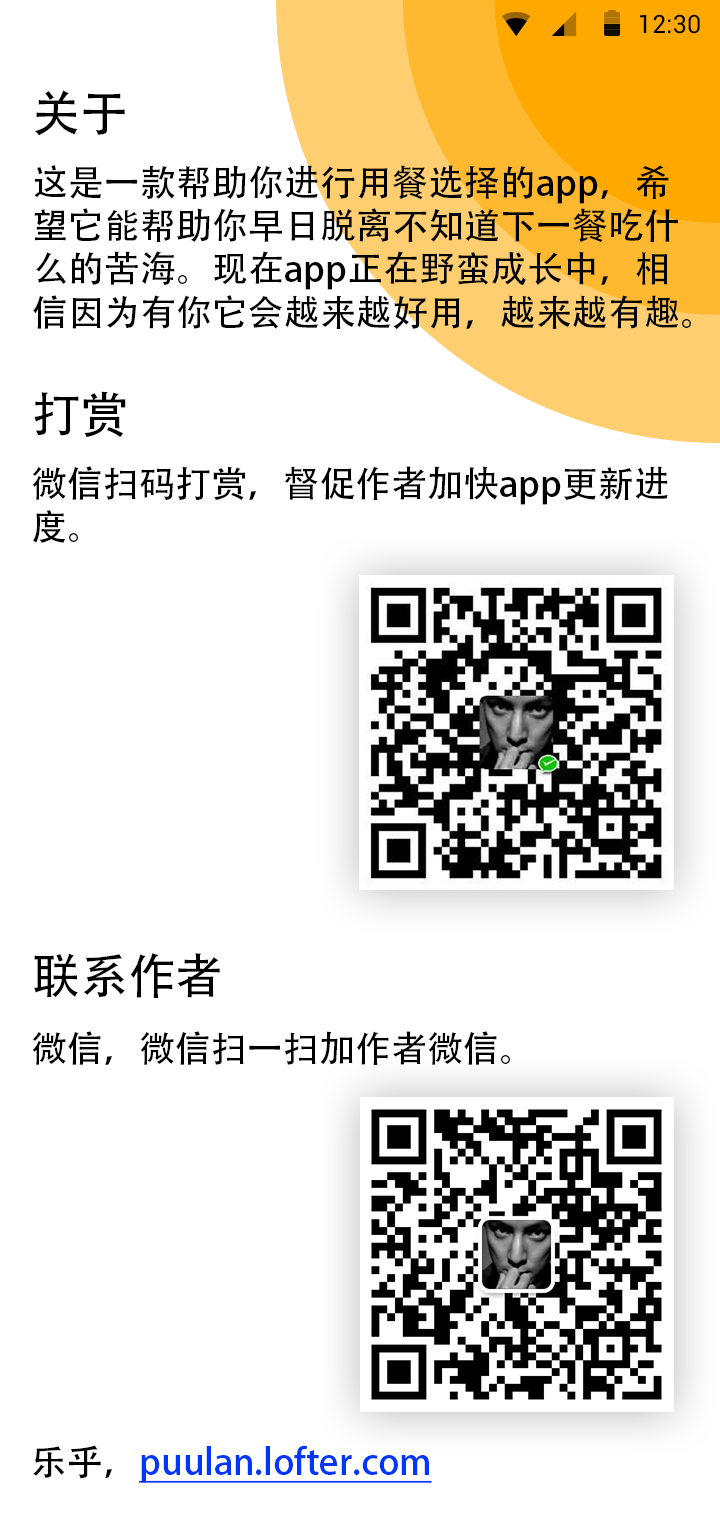
<style>
.page{position:relative;width:720px;height:1538px;background:#ffffff}
.page>*{position:absolute;margin:0}
.t1{font:25.4px "Roboto-Regular";color:#000000}
.t2{font:48px "AdobeHeitiStd-Regular";letter-spacing:-0.004em;color:#000000}
.t3{font:36px "AdobeHeitiStd-Regular";color:#000000}
.t4{font:36px "AdobeHeitiStd-Regular";color:#0036ff;text-decoration:underline}
</style>
<div class="page">
<p class="t1" style="left:640px;top:14px;width:60px;height:20px">12:30</p>
<p class="t2" style="left:35px;top:90px;width:90px;height:46px">关于</p>
<p class="t3" style="left:33px;top:165px;width:658px;height:164px">这是一款帮助你进行用餐选择的app，希<br>望它能帮助你早日脱离不知道下一餐吃什<br>么的苦海。现在app正在野蛮成长中，相<br>信因为有你它会越来越好用，越来越有趣</p>
<p class="t2" style="left:34px;top:391px;width:92px;height:47px">打赏</p>
<p class="t3" style="left:32px;top:466px;width:636px;height:77px">微信扫码打赏，督促作者加快app更新进<br>度。</p>
<p class="t2" style="left:34px;top:953px;width:186px;height:45px">联系作者</p>
<p class="t3" style="left:32px;top:1031px;width:478px;height:34px">微信，微信扫一扫加作者微信。</p>
<p class="t4" style="left:33px;top:1445px;width:399px;height:38px"><span class="t3">乐乎，</span>puulan.lofter.com</p>
</div>
